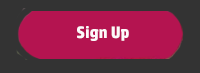
<style>
.page{position:relative;width:200px;height:73px;background:#333333}
.page>*{position:absolute;margin:0}
.t1{font:16.7px "HPSimplified-Bold";color:#fdf9fb}
</style>
<div class="page">
<p class="t1" style="left:77px;top:26px;width:52px;height:15px">Sign Up</p>
</div>
